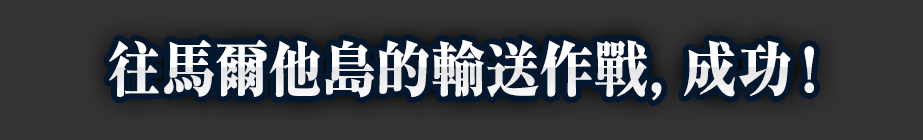
<style>
.page{position:relative;width:923px;height:140px;background:#333333}
.page>*{position:absolute;margin:0}
.t1{font:60px "RyuminPr6N-Heavy";color:#ffffff;font-weight:bold;scale:0.9 1}
</style>
<div class="page">
<p class="t1" style="left:109px;top:40px;width:705px;height:61px">往馬爾他島的輸送作戰，成功！</p>
</div>
